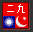
<style>
.page{position:relative;width:33px;height:32px;background:#f20000}
.page>*{position:absolute;margin:0}
.t1{font:10.4px "SimSun";color:#ffffff}
</style>
<div class="page">
<p class="t1" style="left:7px;top:4px;width:18px;height:9px">二九</p>
</div>
